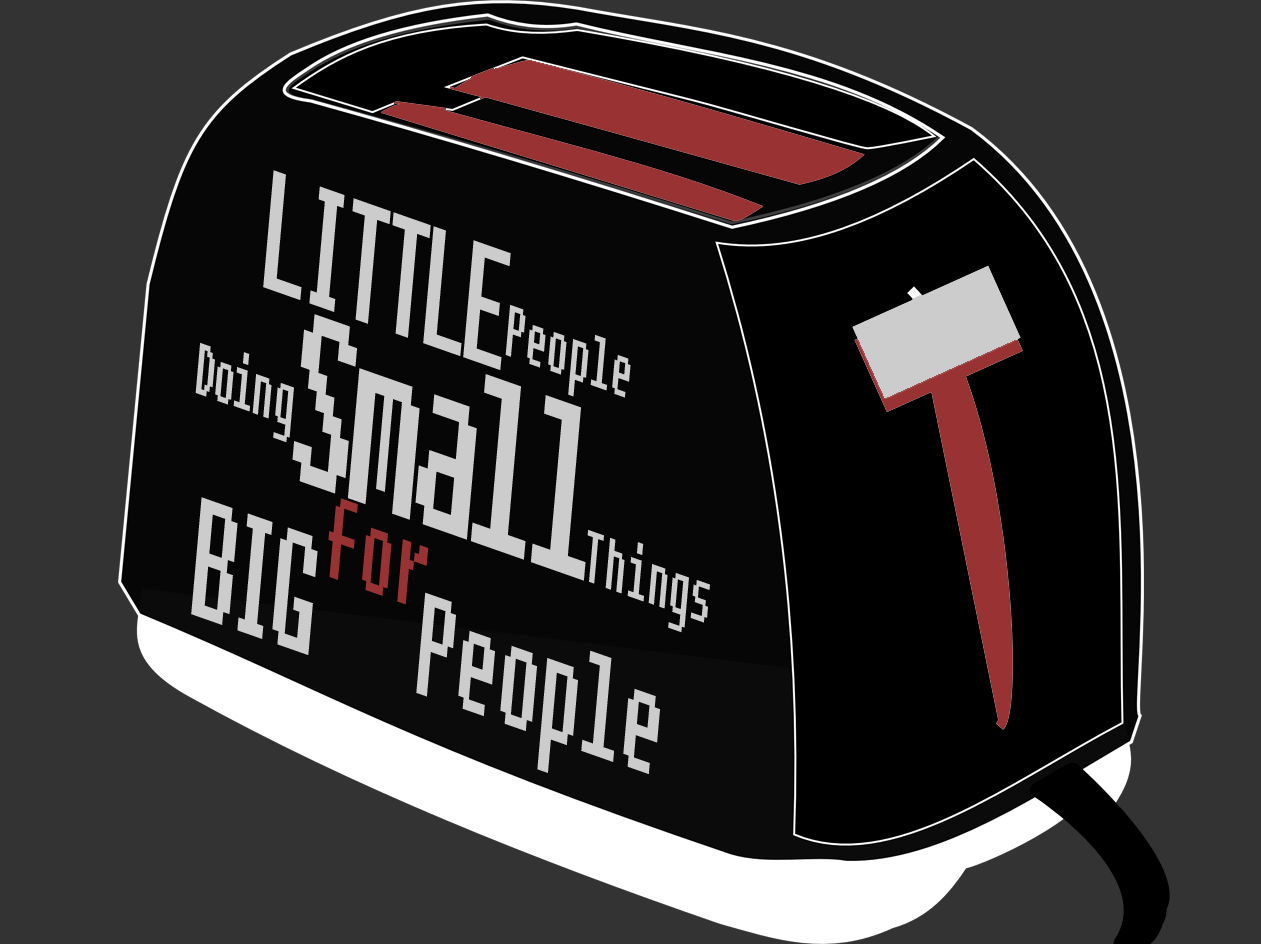
<style>
.page{position:relative;width:1261px;height:944px;background:#333333}
.page>*{position:absolute;margin:0}
.t1{font:167px/14.4px "Fixedsys";letter-spacing:-0.12em;color:#cccccc;scale:0.5 1}
.t2{font:71.6px/22.3px "Fixedsys";color:#cccccc;scale:0.5 1}
.t3{font:71.6px/192.5px "Fixedsys";letter-spacing:-0.06em;color:#cccccc;scale:0.5 1}
.t4{font:238.6px/202.1px "Fixedsys";color:#cccccc;scale:0.5 1}
.t5{font:71.6px/63.7px "Fixedsys";color:#cccccc;scale:0.5 1}
.t6{font:114.5px/83.5px "Fixedsys";letter-spacing:0.04em;color:#993333;scale:0.5 1}
.t7{font:167px/63.7px "Fixedsys";letter-spacing:-0.12em;color:#cccccc;scale:0.5 1}
.t8{font:167px/82.8px "Fixedsys";letter-spacing:-0.12em;color:#cccccc;scale:0.5 1}
.t9{font:143.1px/82.8px "Fixedsys";letter-spacing:-0.02em;color:#cccccc;scale:0.5 1}
.t10{font:143.1px/63.7px "Fixedsys";letter-spacing:-0.02em;color:#cccccc;scale:0.5 1}
</style>
<div class="page">
<p class="t1" style="left:191px;top:170px;width:519px;height:604px;text-align:center;rotate:19deg">LITTLE <span class="t2">People<br></span><span class="t3">Doing </span><span class="t4">Small </span><span class="t5">Things<br></span><span class="t6">for<br></span><span class="t7">BI</span><span class="t8">G </span><span class="t9">P</span><span class="t10">eople</span></p>
</div>
